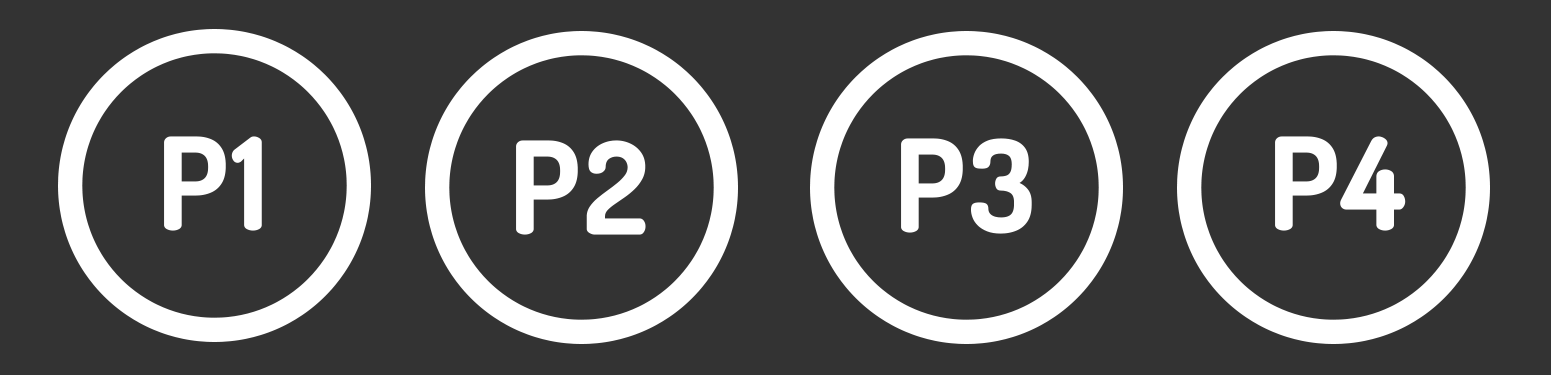
<style>
.page{position:relative;width:1551px;height:375px;background:#333333}
.page>*{position:absolute;margin:0}
.t1{font:127.4px "Dosis-Bold";color:#ffffff;font-weight:bold}
</style>
<div class="page">
<p class="t1" style="left:164px;top:136px;width:98px;height:95px">P1</p>
<p class="t1" style="left:1275px;top:136px;width:131px;height:95px">P4</p>
<p class="t1" style="left:516px;top:140px;width:130px;height:95px">P2</p>
<p class="t1" style="left:901px;top:138px;width:131px;height:96px">P3</p>
</div>
